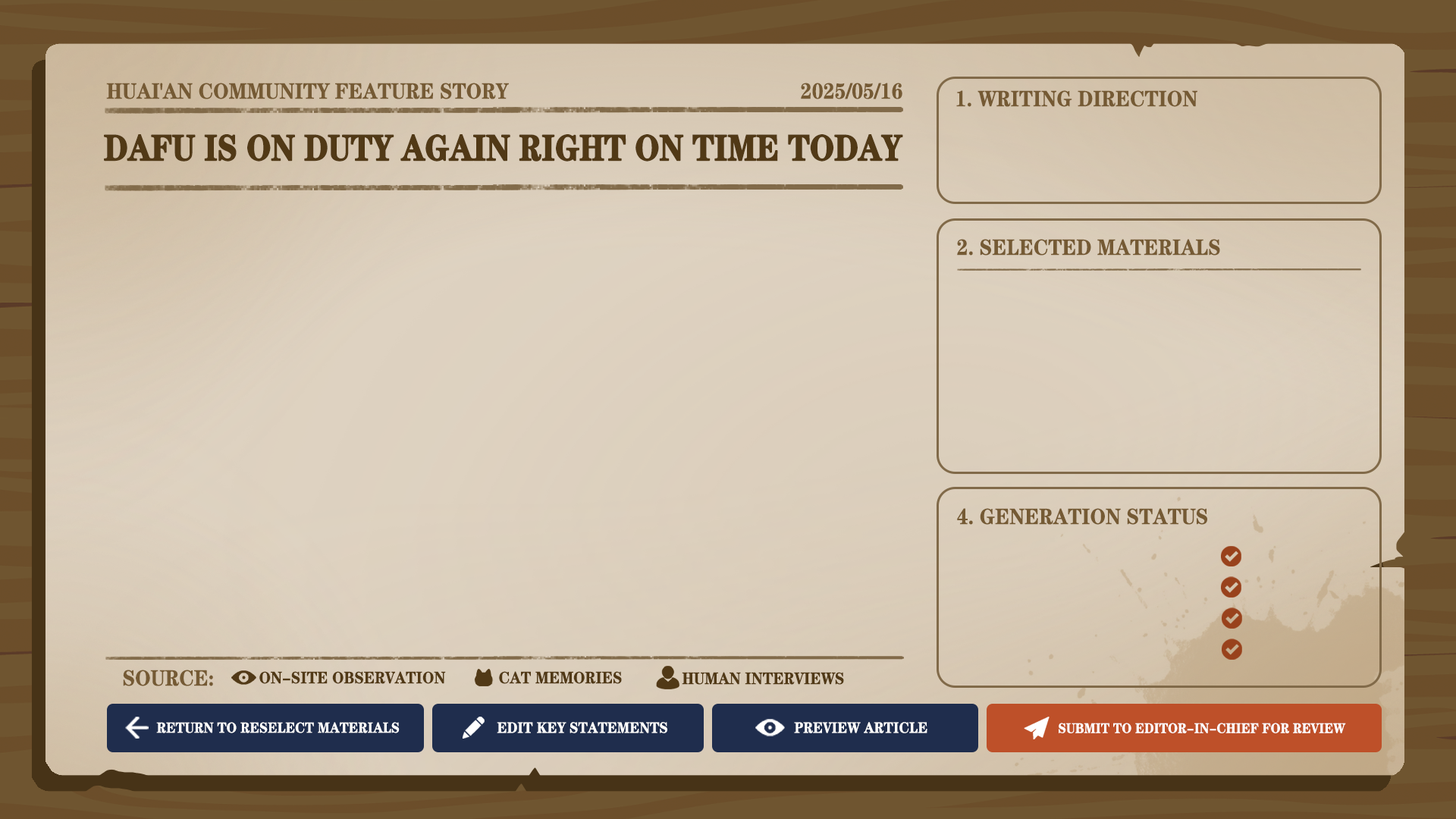
<style>
.page{position:relative;width:1456px;height:819px}
.page>*{position:absolute;margin:0}
.t1{font:22.2px "FZCHSJW--GB1-0";color:#755a34;text-transform:uppercase;scale:0.9 1}
.t2{font:36.6px "FZCHSJW--GB1-0";letter-spacing:-0.025em;color:#513916;text-transform:uppercase;font-weight:bold;scale:0.86 1}
.t3{font:16.7px "FZCHSJW--GB1-0";color:#513916;text-transform:uppercase;scale:0.9 1}
.t4{font:14.7px "FZCHSJW--GB1-0";color:#ffffff;text-transform:uppercase;scale:0.9 1}
.t5{font:15.3px "FZCHSJW--GB1-0";color:#ffffff;text-transform:uppercase;scale:0.9 1}
.t6{font:14px "FZCHSJW--GB1-0";color:#ffffff;text-transform:uppercase;scale:0.9 1}
</style>
<div class="page">
<p class="t1" style="left:106px;top:83px;width:403px;height:16px">Huai'an Community Feature Story</p>
<p class="t1" style="left:801px;top:83px;width:101px;height:16px">2025/05/16</p>
<p class="t1" style="left:956px;top:90px;width:241px;height:17px">1. Writing Direction</p>
<p class="t2" style="left:104px;top:134px;width:799px;height:28px">Dafu is on duty again right on time today</p>
<p class="t1" style="left:957px;top:239px;width:263px;height:17px">2. Selected Materials</p>
<p class="t1" style="left:957px;top:508px;width:250px;height:17px">4. Generation Status</p>
<p class="t1" style="left:123px;top:670px;width:90px;height:16px">Source:</p>
<p class="t3" style="left:259px;top:671px;width:187px;height:13px">On-Site Observation</p>
<p class="t3" style="left:499px;top:671px;width:123px;height:13px">Cat Memories</p>
<p class="t3" style="left:682px;top:672px;width:162px;height:13px">Human Interviews</p>
<p class="t4" style="left:156px;top:722px;width:244px;height:11px">Return to Reselect Materials</p>
<p class="t5" style="left:497px;top:722px;width:170px;height:11px">Edit Key Statements</p>
<p class="t5" style="left:794px;top:722px;width:133px;height:11px">Preview Article</p>
<p class="t6" style="left:1059px;top:723px;width:287px;height:10px">Submit to Editor-in-Chief for Review</p>
</div>
